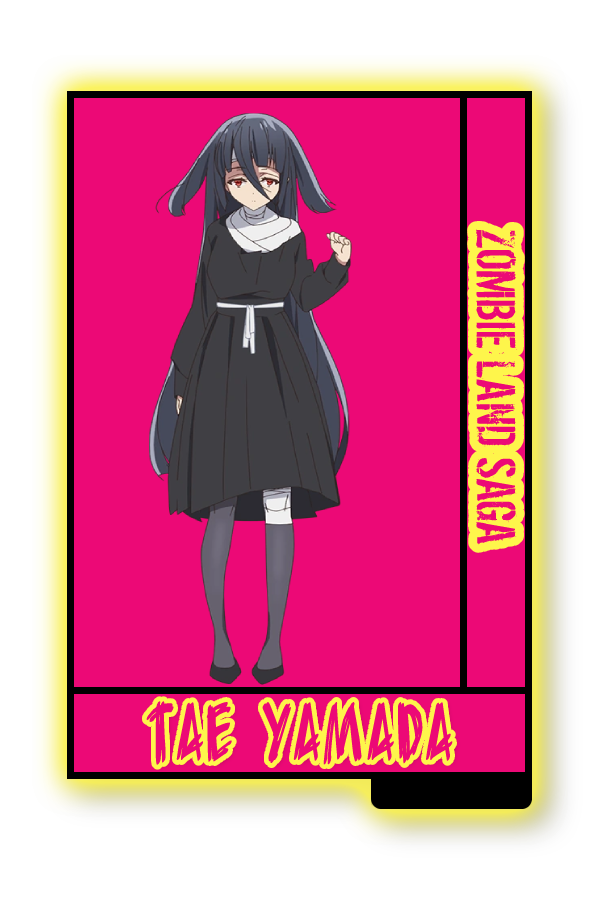
<style>
.page{position:relative;width:600px;height:900px;background:#ec0976}
.page>*{position:absolute;margin:0}
.t1{font:60.3px "DirtyEgo";color:#ec0976;scale:1.05 1}
.t2{font:72.2px "AnuDaw";color:#ec0976;scale:0.47 1}
</style>
<div class="page">
<p class="t1" style="left:476px;top:229px;width:41px;height:316px;rotate:90deg">ZOMBIE LAND SAGA</p>
<p class="t2" style="left:146px;top:701px;width:307px;height:64px">Tae Yamada</p>
</div>
